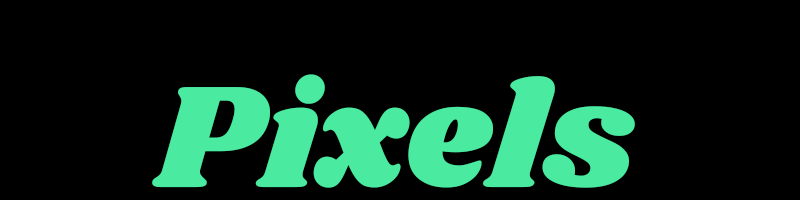
<style>
.page{position:relative;width:800px;height:200px;background:#000000}
.page>*{position:absolute;margin:0}
.t1{font:150px "Shrikhand-Regular";color:#4aeba1}
</style>
<div class="page">
<p class="t1" style="left:152px;top:74px;width:483px;height:114px">Pixels</p>
</div>
